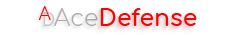
<style>
.page{position:relative;width:250px;height:35px;background:#ffffff}
.page>*{position:absolute;margin:0}
.t1{font:17.3px "Comfortaa-Light";color:#fc0202}
.t2{font:17.3px "Comfortaa-Regular";color:#c4c4c4}
.t3{font:23.3px "Comfortaa-Light";color:#acacac}
.t4{font:23.3px "Comfortaa-Bold";color:#fc0202}
</style>
<div class="page">
<p class="t1" style="left:39px;top:6px;width:12px;height:14px">A</p>
<p class="t2" style="left:43px;top:12px;width:12px;height:14px">D</p>
<p class="t3" style="left:54px;top:8px;width:44px;height:18px">Ace</p>
<p class="t4" style="left:100px;top:8px;width:97px;height:18px">Defense</p>
</div>
